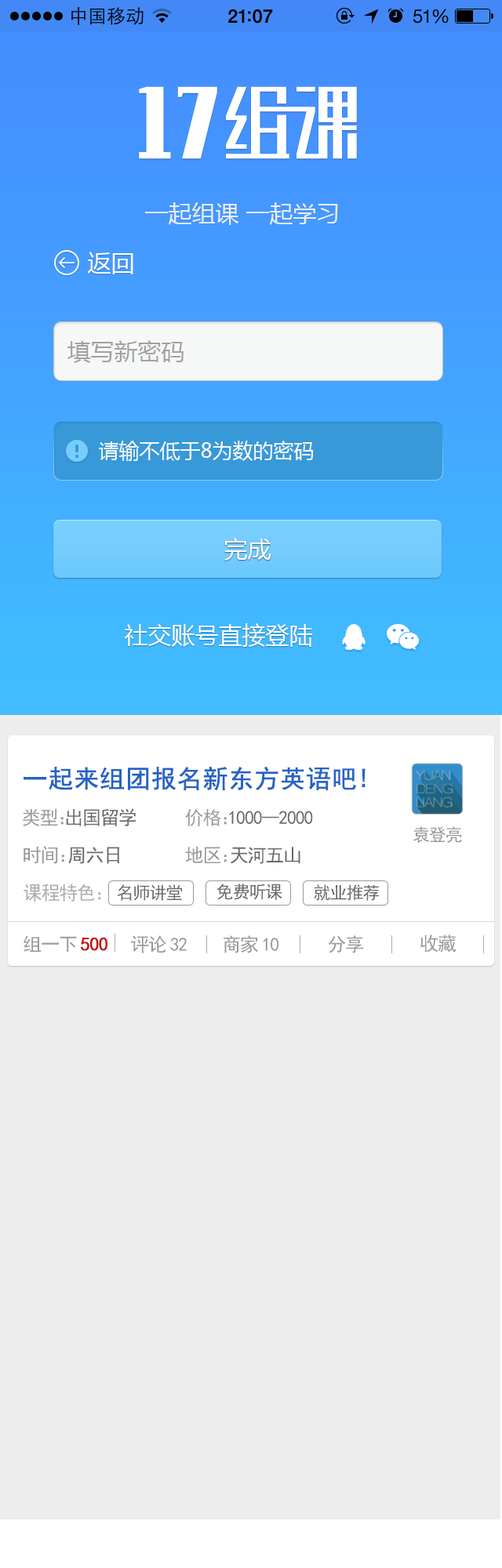
<style>
.page{position:relative;width:502px;height:1568px;background:#ededed}
.page>*{position:absolute;margin:0}
.t1{font:23.5px "MicrosoftYaHei";color:#ededed}
.t2{font:23.5px "MicrosoftYaHei";color:#fefefe}
.t3{font:23.5px "MicrosoftYaHei";color:#a1a1a1}
.t4{font:20.4px "MicrosoftYaHei";color:#f6f8f8}
.t5{font:25.1px "SimHei";color:#2463c5;font-weight:bold}
.t6{font:18.8px "SimHei";letter-spacing:-0.05em;color:#696969}
.t7{font:18.8px "SimHei";letter-spacing:-0.05em;color:#999999}
.t8{font:18.8px "SimHei";letter-spacing:-0.62em;color:#999999}
.t9{font:17.2px "SimHei";letter-spacing:-0.05em;color:#999999}
.t10{font:18.8px "SimHei";letter-spacing:-0.5em;color:#999999}
.t11{font:18.8px "SimHei";letter-spacing:-0.52em;color:#999999}
.t12{font:18.8px "SimHei";letter-spacing:-0.05em;color:#acacac}
.t13{font:18.8px "SimHei";color:#acacac}
.t14{font:17.2px "SimHei";letter-spacing:-0.05em;color:#696969}
.t15{font:18.8px "SimHei";letter-spacing:-0.05em;color:#c61414;font-weight:bold}
.t16{font:18.8px "SimHei";letter-spacing:0.15em;color:#999999}
</style>
<div class="page">
<p class="t1" style="left:145px;top:202px;width:193px;height:23px">一起组课 一起学习</p>
<p class="t2" style="left:88px;top:252px;width:45px;height:22px">返回</p>
<p class="t3" style="left:67px;top:340px;width:116px;height:23px">填写新密码</p>
<p class="t4" style="left:99px;top:441px;width:215px;height:20px">请输不低于8为数的密码</p>
<p class="t2" style="left:224px;top:538px;width:47px;height:23px">完成</p>
<p class="t2" style="left:125px;top:623px;width:188px;height:24px">社交账号直接登陆</p>
<p class="t5" style="left:24px;top:766px;width:341px;height:24px">一起来组团报名新东方英语吧!</p>
<p class="t6" style="left:23px;top:808px;width:113px;height:18px"><span class="t7">类型</span><span class="t8">：</span>出国留学</p>
<p class="t6" style="left:185px;top:808px;width:128px;height:18px"><span class="t7">价格</span><span class="t8">：</span>1000--2000</p>
<p class="t9" style="left:412px;top:826px;width:50px;height:17px">袁登亮</p>
<p class="t6" style="left:24px;top:846px;width:95px;height:18px"><span class="t7">时间</span><span class="t10">：</span>周六日</p>
<p class="t6" style="left:185px;top:846px;width:115px;height:18px"><span class="t7">地区</span><span class="t11">：</span>天河五山</p>
<p class="t12" style="left:24px;top:884px;width:77px;height:18px">课程特色<span class="t13">：</span></p>
<p class="t14" style="left:117px;top:884px;width:66px;height:17px">名师讲堂</p>
<p class="t14" style="left:216px;top:884px;width:66px;height:16px">免费听课</p>
<p class="t14" style="left:314px;top:884px;width:65px;height:17px">就业推荐</p>
<p class="t15" style="left:24px;top:935px;width:83px;height:18px"><span class="t7">组一</span><span class="t16">下</span>500</p>
<p class="t7" style="left:131px;top:935px;width:56px;height:18px">评<span class="t16">论</span>32</p>
<p class="t7" style="left:223px;top:935px;width:55px;height:18px">商<span class="t16">家</span>10</p>
<p class="t7" style="left:328px;top:935px;width:36px;height:18px">分享</p>
<p class="t7" style="left:420px;top:935px;width:36px;height:18px">收藏</p>
</div>
